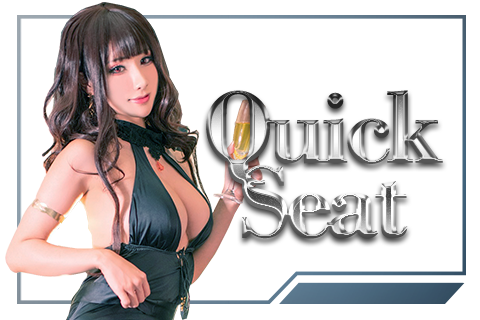
<style>
.page{position:relative;width:480px;height:320px;background:#ffffff}
.page>*{position:absolute;margin:0}
.t1{font:108.2px/74.6px "BodoniMT-Bold";letter-spacing:-0.05em}
</style>
<div class="page">
<p class="t1" style="left:206px;top:90px;width:237px;height:149px;text-align:center">Quick<br>Seat</p>
</div>
